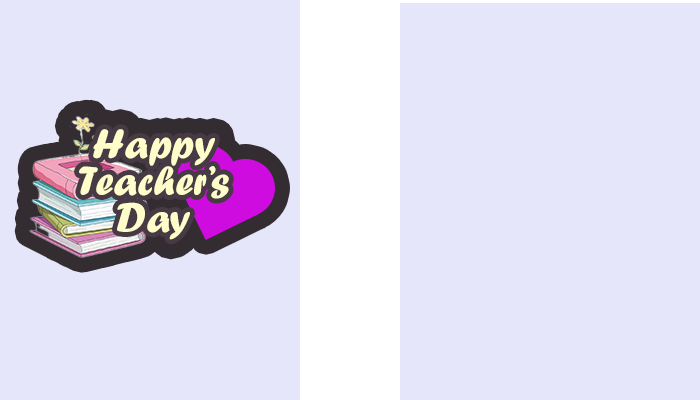
<style>
.page{position:relative;width:700px;height:400px;background:#e6e6fa}
.page>*{position:absolute;margin:0}
.t1{font:42.9px/36.9px "ForteMT";color:#fffecb}
</style>
<div class="page">
<p class="t1" style="left:79px;top:129px;width:150px;height:111px;text-align:center">Happy<br>Teacher’s<br>Day</p>
</div>
